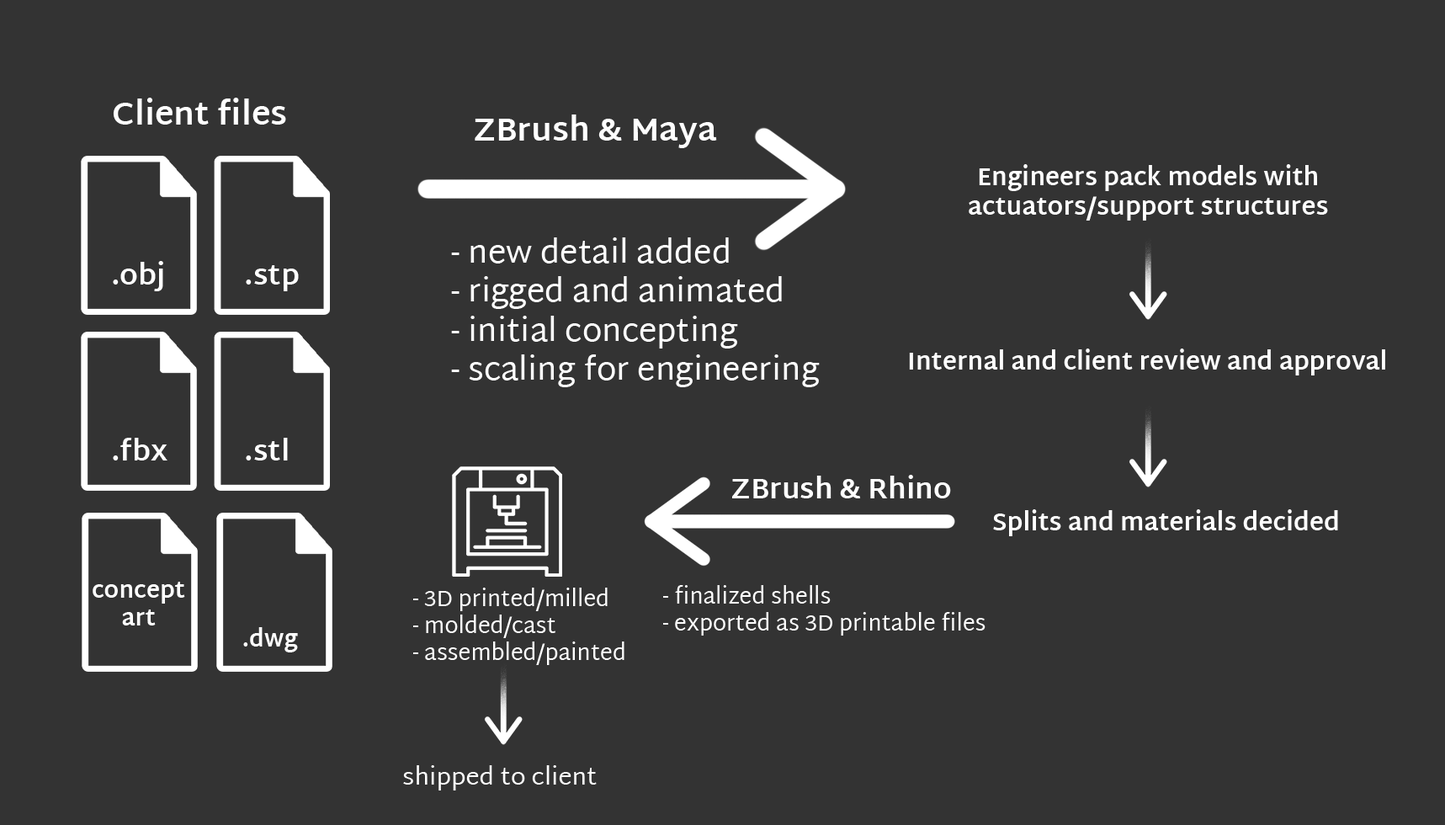
<style>
.page{position:relative;width:1445px;height:825px;background:#333333}
.page>*{position:absolute;margin:0}
.t1{font:32.5px "MartelSans-Bold";color:#ffffff}
.t2{font:24.4px "MartelSans-Bold";color:#ffffff}
.t3{font:32.5px "MartelSans-Regular";color:#ffffff}
.t4{font:28.5px "MartelSans-Bold";color:#ffffff}
.t5{font:28.4px "MartelSans-Bold";color:#ffffff}
.t6{font:23px "MartelSans-Bold";color:#ffffff}
.t7{font:22.3px "MartelSans-Regular";color:#ffffff}
.t8{font:24.4px "MartelSans-Regular";color:#ffffff}
</style>
<div class="page">
<p class="t1" style="left:113px;top:98px;width:173px;height:27px">Client files</p>
<p class="t1" style="left:475px;top:114px;width:242px;height:34px">ZBrush &amp; Maya</p>
<p class="t2" style="left:969px;top:164px;width:359px;height:57px;text-align:center">Engineers pack models with<br>actuators/support structures</p>
<p class="t3" style="left:451px;top:237px;width:369px;height:150px">- new detail added<br>- rigged and animated<br>- initial concepting<br>- scaling for engineering</p>
<p class="t4" style="left:113px;top:261px;width:50px;height:30px">.obj</p>
<p class="t4" style="left:246px;top:265px;width:53px;height:26px">.stp</p>
<p class="t2" style="left:909px;top:349px;width:477px;height:26px">Internal and client review and approval</p>
<p class="t4" style="left:113px;top:438px;width:55px;height:22px">.fbx</p>
<p class="t4" style="left:246px;top:438px;width:42px;height:22px">.stl</p>
<p class="t5" style="left:732px;top:475px;width:219px;height:23px">ZBrush &amp; Rhino</p>
<p class="t2" style="left:993px;top:509px;width:345px;height:27px">Splits and materials decided</p>
<p class="t6" style="left:93px;top:582px;width:92px;height:43px;text-align:center">concept<br>art</p>
<p class="t7" style="left:413px;top:588px;width:212px;height:77px">- 3D printed/milled<br>- molded/cast<br>- assembled/painted</p>
<p class="t7" style="left:663px;top:585px;width:323px;height:51px">- finalized shells<br>- exported as 3D printable files</p>
<p class="t6" style="left:243px;top:627px;width:55px;height:25px">.dwg</p>
<p class="t8" style="left:403px;top:765px;width:194px;height:25px">shipped to client</p>
</div>
